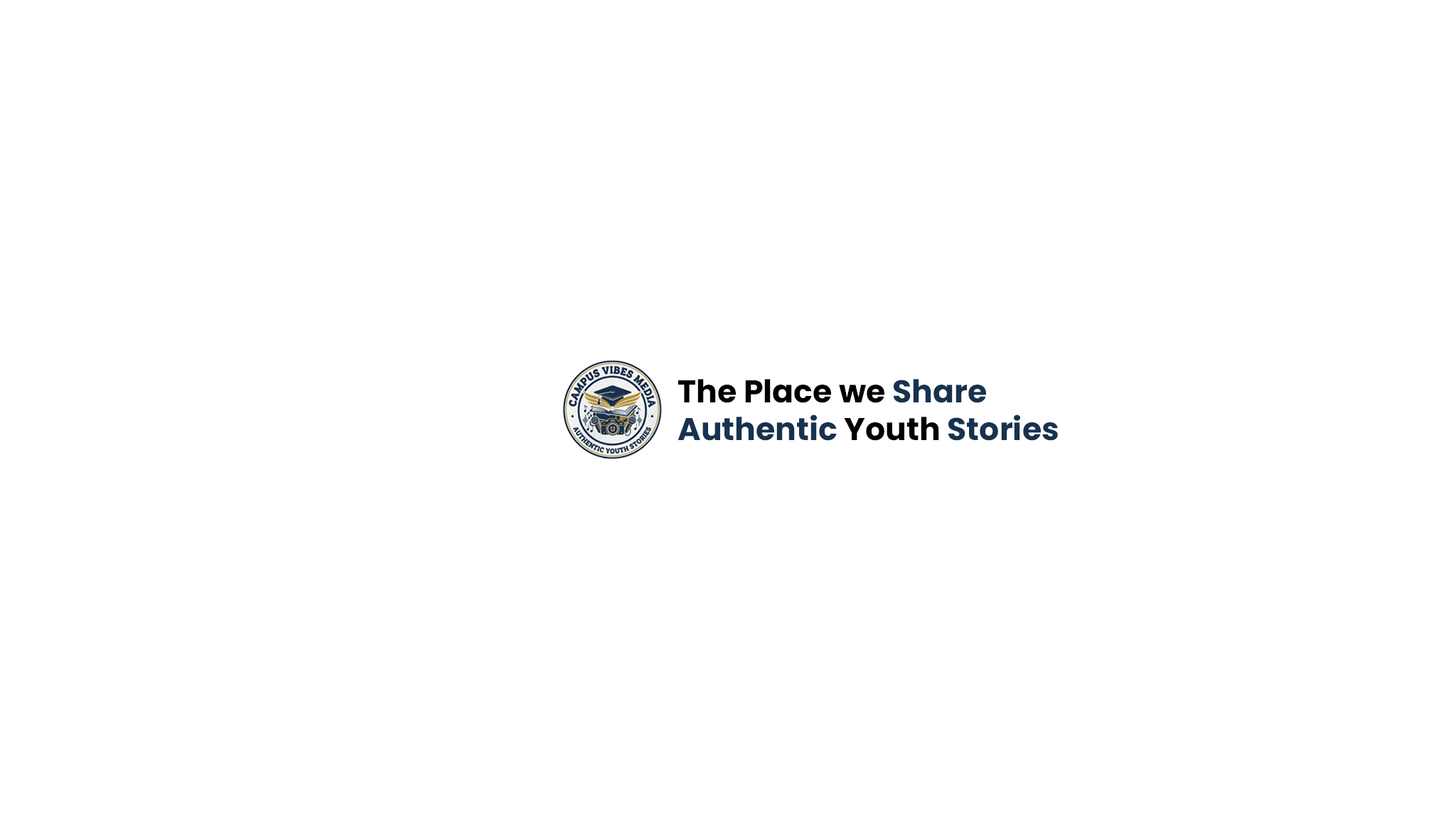
<style>
.page{position:relative;width:1456px;height:819px;background:#ffffff}
.page>*{position:absolute;margin:0}
.t1{font:31.4px "Poppins-Bold";color:#000000}
.t2{font:31.4px "Poppins-Bold";color:#18324d}
.t3{font:31.4px "Poppins-Bold";color:#17324f}
</style>
<div class="page">
<p class="t1" style="left:678px;top:379px;width:380px;height:62px">The Place we <span class="t2">Share <br></span><span class="t3">Authentic </span>Youth <span class="t3">Stories</span></p>
</div>
